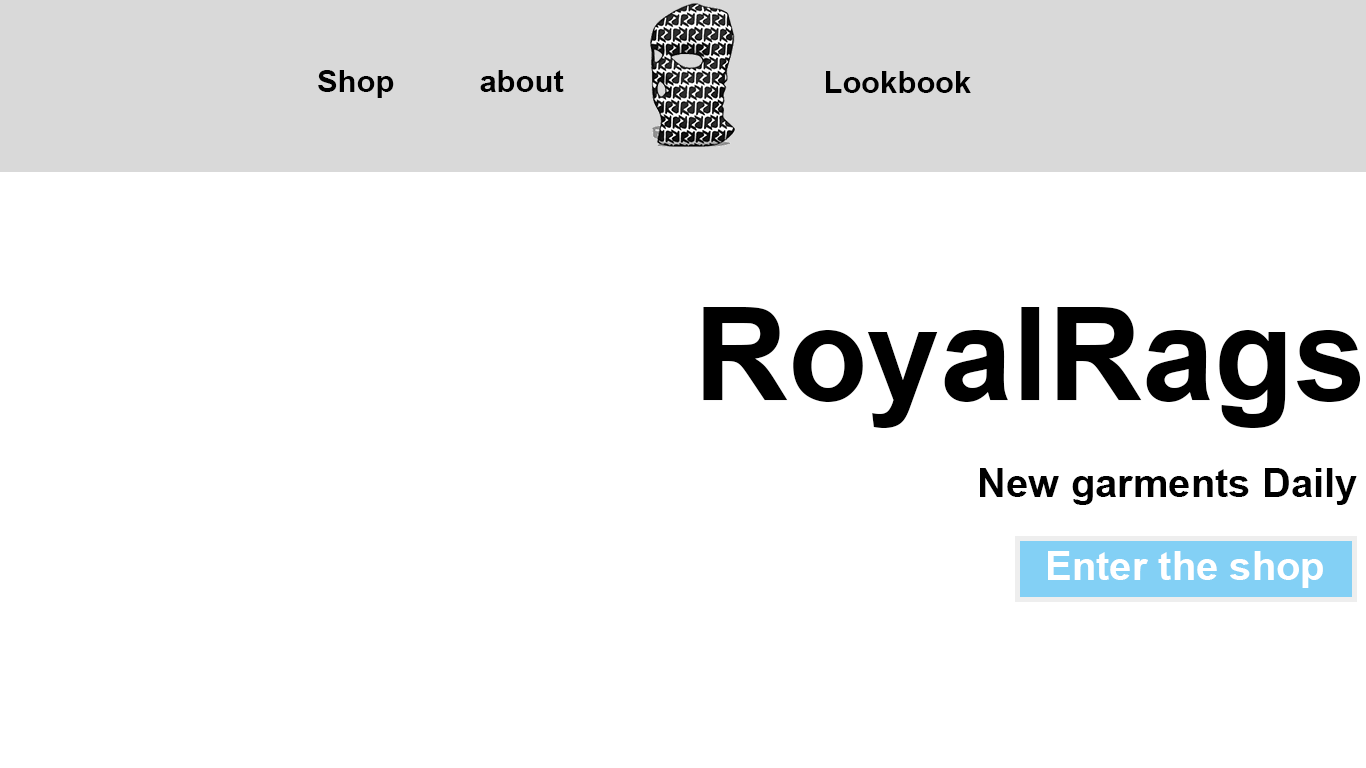
<style>
.page{position:relative;width:1366px;height:768px;background:#ffffff}
.page>*{position:absolute;margin:0}
.t1{font:31px "Arial-BoldMT";color:#000000}
.t2{font:130px "Arial-BoldMT";color:#000000}
.t3{font:40px "Arial-BoldMT";color:#000000}
.t4{font:40px "Arial-BoldMT";color:#ffffff}
</style>
<div class="page">
<p class="t1" style="left:318px;top:70px;width:76px;height:28px">Shop</p>
<p class="t1" style="left:480px;top:70px;width:84px;height:22px">about</p>
<p class="t1" style="left:826px;top:71px;width:145px;height:22px">Lookbook</p>
<p class="t2" style="left:703px;top:307px;width:658px;height:121px">RoyalRags</p>
<p class="t3" style="left:980px;top:468px;width:377px;height:37px">New garments Daily</p>
<p class="t4" style="left:1048px;top:551px;width:275px;height:37px">Enter the shop</p>
</div>
